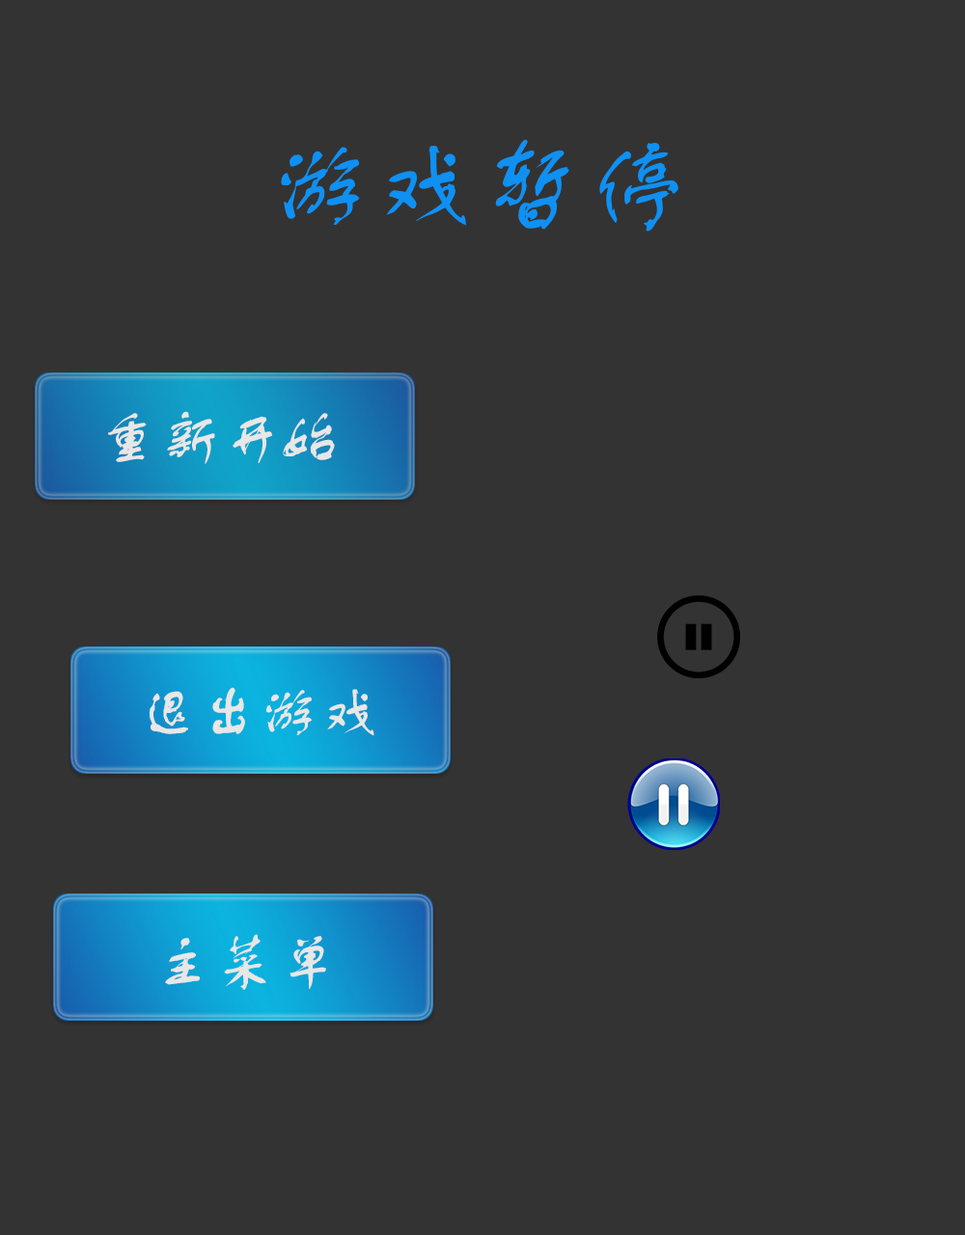
<style>
.page{position:relative;width:965px;height:1235px;background:#333333}
.page>*{position:absolute;margin:0}
.t1{font:106.2px "FZSTK--GBK1-0";color:#0f90f3}
.t2{font:61.8px "FZSTK--GBK1-0";color:#ffffff}
</style>
<div class="page">
<p class="t1" style="left:281px;top:139px;width:398px;height:93px">游戏暂停</p>
<p class="t2" style="left:108px;top:411px;width:227px;height:53px">重新开始</p>
<p class="t2" style="left:150px;top:687px;width:224px;height:49px">退出游戏</p>
<p class="t2" style="left:165px;top:934px;width:161px;height:56px">主菜单</p>
</div>
